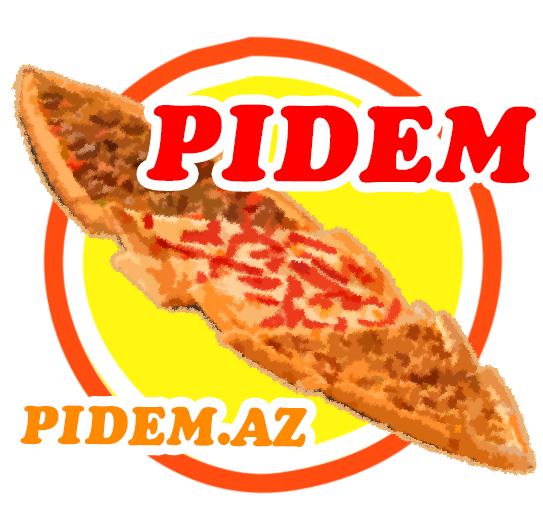
<style>
.page{position:relative;width:543px;height:528px;background:#ffffff}
.page>*{position:absolute;margin:0}
.t1{font:96.3px "CooperBlackItalic";color:#ff0000}
.t2{font:48.5px "CooperBlackItalic";color:#ff8a00}
</style>
<div class="page">
<p class="t1" style="left:146px;top:104px;width:390px;height:80px">PIDEM</p>
<p class="t2" style="left:20px;top:405px;width:287px;height:42px">PIDEM.AZ</p>
</div>
